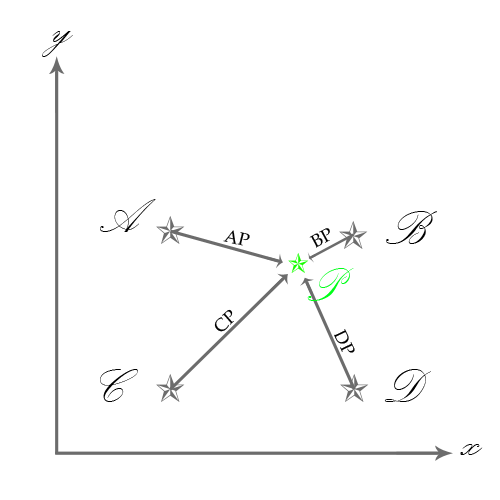
<style>
.page{position:relative;width:500px;height:500px;background:#ffffff}
.page>*{position:absolute;margin:0}
.t1{font:60px "PalaceScriptMT";color:#000000}
.t2{font:18px "PalatinoLinotype-Roman";color:#000000}
.t3{font:60px "PalaceScriptMT";color:#00ff18}
</style>
<div class="page">
<p class="t1" style="left:42px;top:31px;width:31px;height:26px">y</p>
<p class="t1" style="left:100px;top:199px;width:56px;height:33px">A</p>
<p class="t1" style="left:386px;top:211px;width:51px;height:33px">B</p>
<p class="t2" style="left:223px;top:230px;width:27px;height:16px;rotate:14deg">AP</p>
<p class="t2" style="left:309px;top:228px;width:21px;height:20px;rotate:-28deg">BP</p>
<p class="t3" style="left:307px;top:268px;width:47px;height:33px">P</p>
<p class="t2" style="left:214px;top:309px;width:20px;height:23px;rotate:-41deg">CP</p>
<p class="t2" style="left:334px;top:329px;width:21px;height:24px;rotate:64deg">DP</p>
<p class="t1" style="left:100px;top:369px;width:38px;height:33px">C</p>
<p class="t1" style="left:384px;top:369px;width:47px;height:33px">D</p>
<p class="t1" style="left:460px;top:444px;width:23px;height:11px">x</p>
</div>
